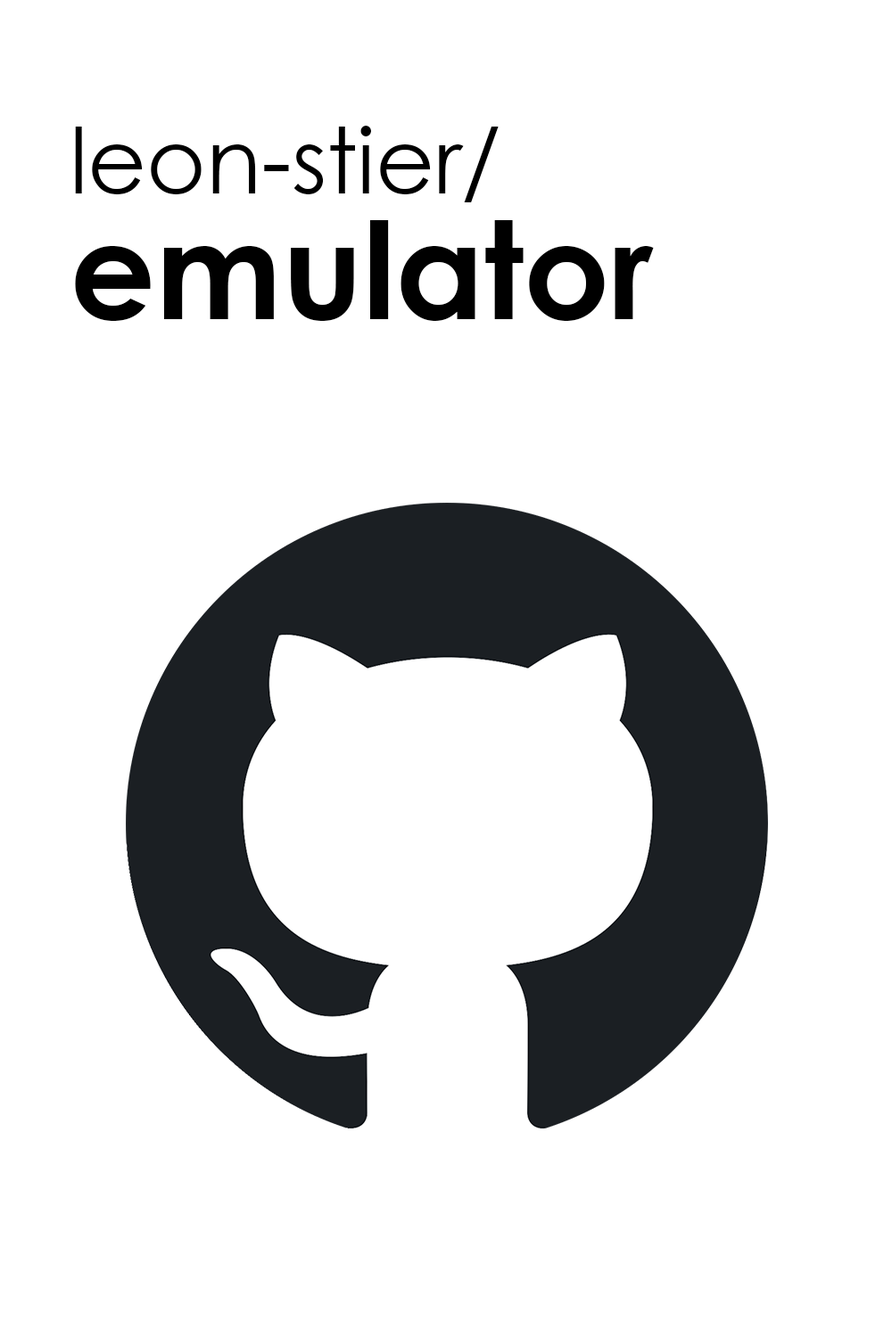
<style>
.page{position:relative;width:892px;height:1337px;background:#ffffff}
.page>*{position:absolute;margin:0}
.t1{font:90.6px "CenturyGothic";color:#000000}
.t2{font:134.4px "CenturyGothic-Bold";color:#000000}
</style>
<div class="page">
<p class="t1" style="left:75px;top:126px;width:423px;height:76px">leon-stier/</p>
<p class="t2" style="left:75px;top:220px;width:579px;height:101px">emulator</p>
</div>
